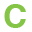
<style>
.page{position:relative;width:32px;height:32px;background:#ffffff}
.page>*{position:absolute;margin:0}
.t1{font:33.3px "Helvetica-Bold";color:#85c447}
</style>
<div class="page">
<p class="t1" style="left:4px;top:4px;width:22px;height:24px">C</p>
</div>
